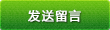
<style>
.page{position:relative;width:110px;height:30px}
.page>*{position:absolute;margin:0}
.t1{font:12px "MicrosoftYaHei";letter-spacing:0.1em;color:#ffffff;font-weight:bold}
</style>
<div class="page">
<p class="t1" style="left:28px;top:9px;width:53px;height:13px">发送留言</p>
</div>
